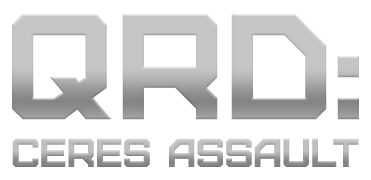
<style>
.page{position:relative;width:371px;height:180px;background:#ffffff}
.page>*{position:absolute;margin:0}
.t1{font:150px "Furore";letter-spacing:-0.002em}
.t2{font:40px "Furore";letter-spacing:-0.002em}
</style>
<div class="page">
<p class="t1" style="left:12px;top:14px;width:347px;height:106px">QRD:</p>
<p class="t2" style="left:12px;top:138px;width:347px;height:29px">CERES ASSAULT</p>
</div>
